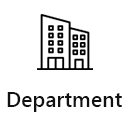
<style>
.page{position:relative;width:129px;height:124px;background:#ffffff}
.page>*{position:absolute;margin:0}
.t1{font:21.3px "YuGothicUI-Semibold";color:#111111}
</style>
<div class="page">
<p class="t1" style="left:7px;top:92px;width:115px;height:20px">Department</p>
</div>
